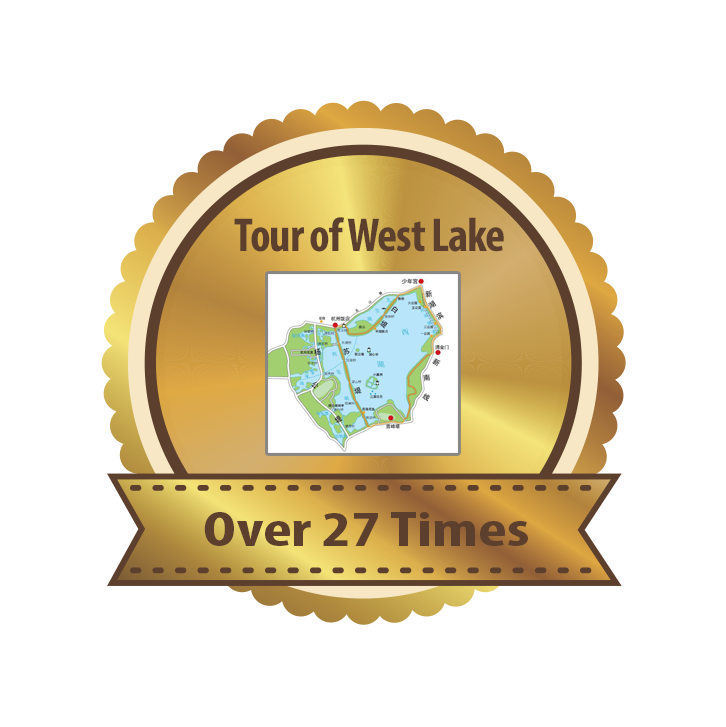
<style>
.page{position:relative;width:726px;height:727px;background:#ffffff}
.page>*{position:absolute;margin:0}
.t1{font:48px "MyriadPro-BoldCond";letter-spacing:-0.025em;color:#5c3f2d}
.t2{font:50px "MyriadPro-BoldCond";color:#5c3f2d;scale:1.36 1}
</style>
<div class="page">
<p class="t1" style="left:234px;top:217px;width:270px;height:35px">Tour of West Lake</p>
<p class="t2" style="left:204px;top:512px;width:324px;height:34px">Over 27 Times</p>
</div>
